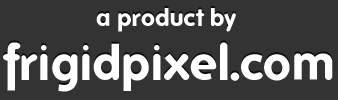
<style>
.page{position:relative;width:338px;height:100px;background:#333333}
.page>*{position:absolute;margin:0}
.t1{font:24px "Folks-Bold";color:#ffffff}
.t2{font:48px "Folks-Bold";color:#ffffff}
</style>
<div class="page">
<p class="t1" style="left:96px;top:8px;width:140px;height:24px">a product by</p>
<p class="t2" style="left:3px;top:42px;width:330px;height:50px">frigidpixel.com</p>
</div>
